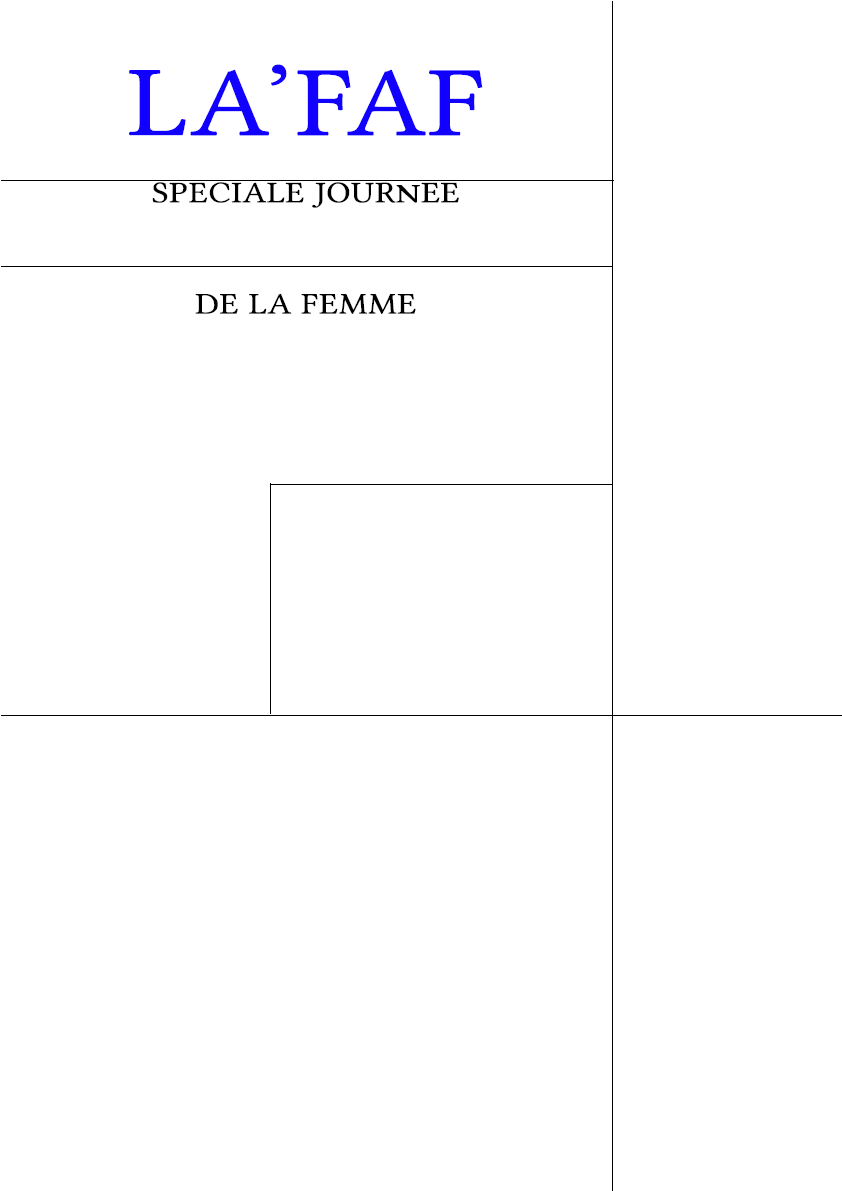
<style>
.page{position:relative;width:842px;height:1191px;background:#ffffff}
.page>*{position:absolute;margin:0}
.t1{font:100px "LinuxLibertineG";color:#1200ff;font-weight:bold;scale:1.13 1}
.t2{font:30px/111.2px "LinuxLibertineG";color:#000000;font-weight:bold;scale:1.13 1}
</style>
<div class="page">
<p class="t1" style="left:129px;top:64px;width:354px;height:72px">LA’FAF</p>
<p class="t2" style="left:152px;top:182px;width:307px;height:132px;text-align:center">SPECIALE JOURNEE <br>DE LA FEMME</p>
</div>
